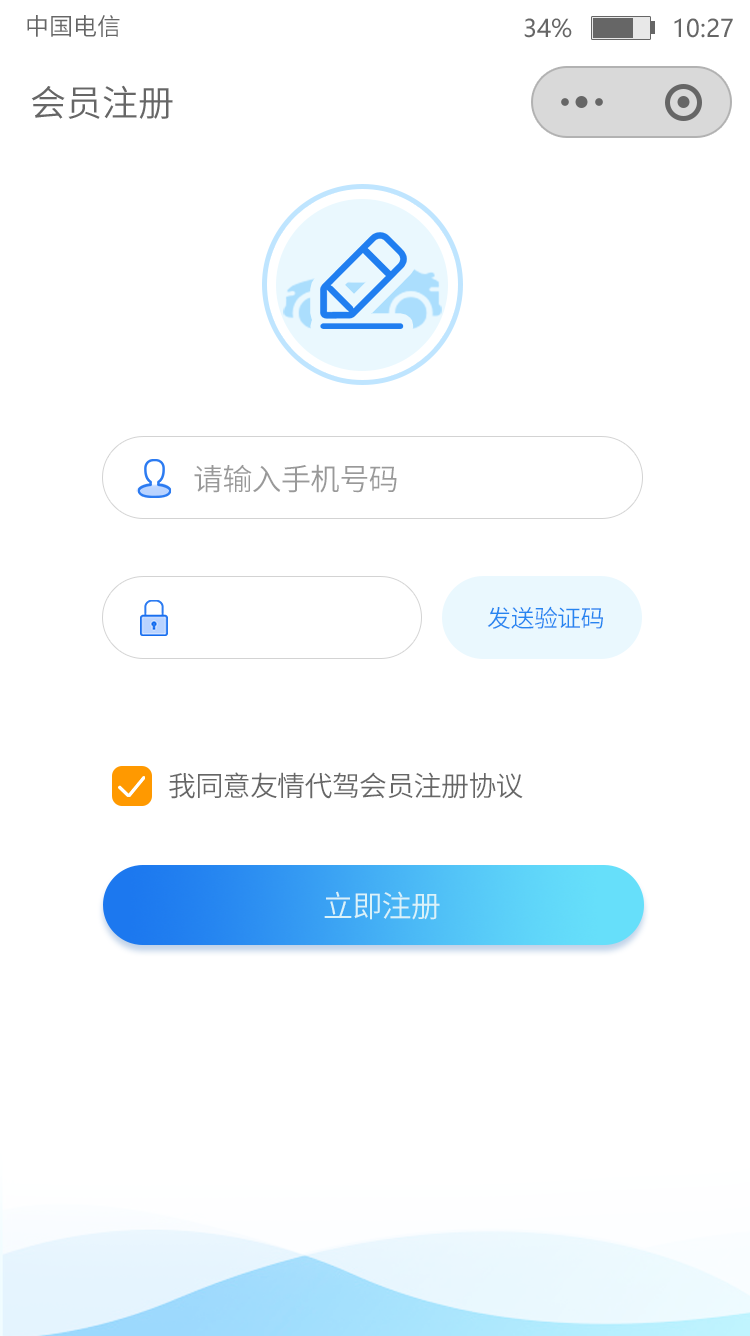
<style>
.page{position:relative;width:750px;height:1336px;background:#ffffff}
.page>*{position:absolute;margin:0}
.t1{font:24px "SourceHanSansCN-Normal";color:#666666}
.t2{font:24px "MicrosoftYaHei";color:#666666}
.t3{font:36px "SourceHanSansCN-Normal";color:#666666}
.t4{font:30px "SourceHanSansCN-Normal";letter-spacing:-0.025em;color:#999999}
.t5{font:24px "SourceHanSansCN-Normal";letter-spacing:-0.025em;color:#2585f0}
.t6{font:28px "SourceHanSansCN-Normal";letter-spacing:-0.025em;color:#666666}
.t7{font:30px "SourceHanSansCN-Normal";letter-spacing:-0.025em;color:#daf2f9}
</style>
<div class="page">
<p class="t1" style="left:27px;top:15px;width:93px;height:22px">中国电信</p>
<p class="t2" style="left:524px;top:18px;width:209px;height:20px">34%              10:27</p>
<p class="t3" style="left:31px;top:85px;width:142px;height:34px">会员注册</p>
<p class="t4" style="left:194px;top:464px;width:203px;height:29px">请输入手机号码</p>
<p class="t5" style="left:487px;top:606px;width:116px;height:23px">发送验证码</p>
<p class="t6" style="left:169px;top:772px;width:354px;height:27px">我同意友情代驾会员注册协议</p>
<p class="t7" style="left:324px;top:891px;width:116px;height:29px">立即注册</p>
</div>
